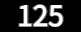
<style>
.page{position:relative;width:81px;height:32px;background:#000000}
.page>*{position:absolute;margin:0}
.t1{font:28px "WebPSD-18463539-0-Regular";color:#ffffff;font-weight:bold}
</style>
<div class="page">
<p class="t1" style="left:0px;top:0px;width:81px;height:32px">125</p>
</div>
